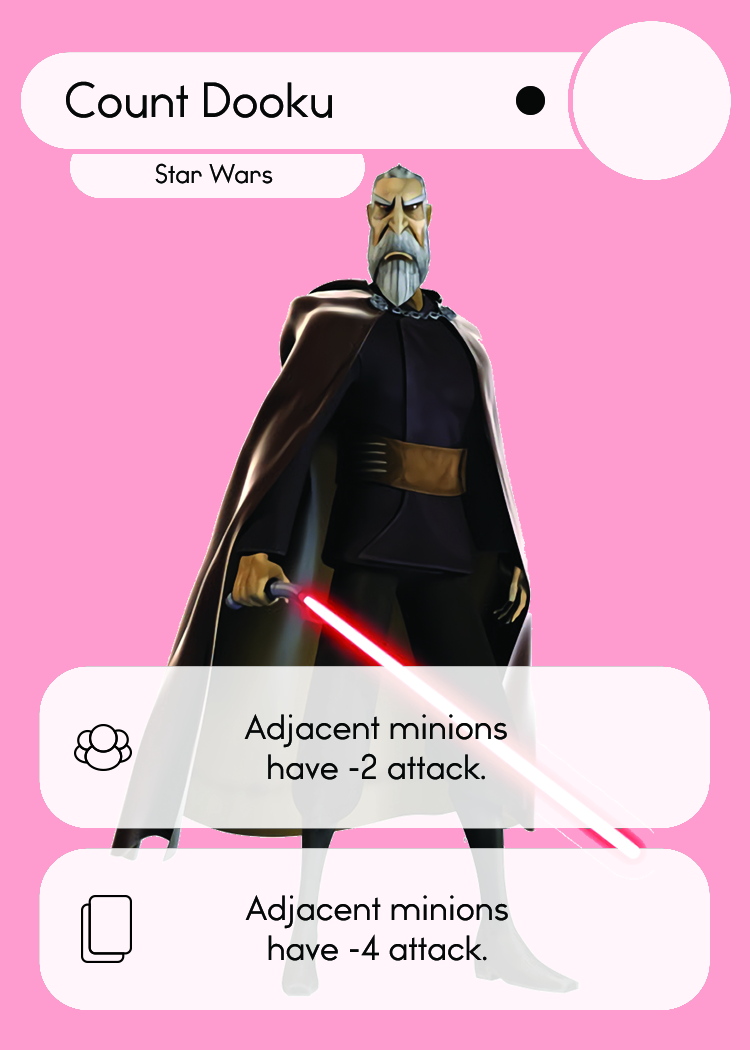
<style>
.page{position:relative;width:750px;height:1050px;background:#ff9ccf}
.page>*{position:absolute;margin:0}
.t1{font:46.7px "WatchwordRegularDemo";color:#060808}
.t2{font:25.5px "WatchwordRegularDemo";color:#060808}
.t3{font:33.3px "WatchwordRegularDemo";color:#060808}
.t4{font:33.3px "Dosis-Medium";color:#060808}
</style>
<div class="page">
<p class="t1" style="left:66px;top:81px;width:266px;height:37px">Count Dooku</p>
<p class="t2" style="left:155px;top:163px;width:118px;height:21px">Star Wars</p>
<p class="t3" style="left:244px;top:714px;width:263px;height:66px;text-align:center">Adjacent minions<br>have -2 attack<span class="t4">.</span></p>
<p class="t3" style="left:245px;top:895px;width:263px;height:66px;text-align:center">Adjacent minions<br>have -4 attack<span class="t4">.</span></p>
</div>
